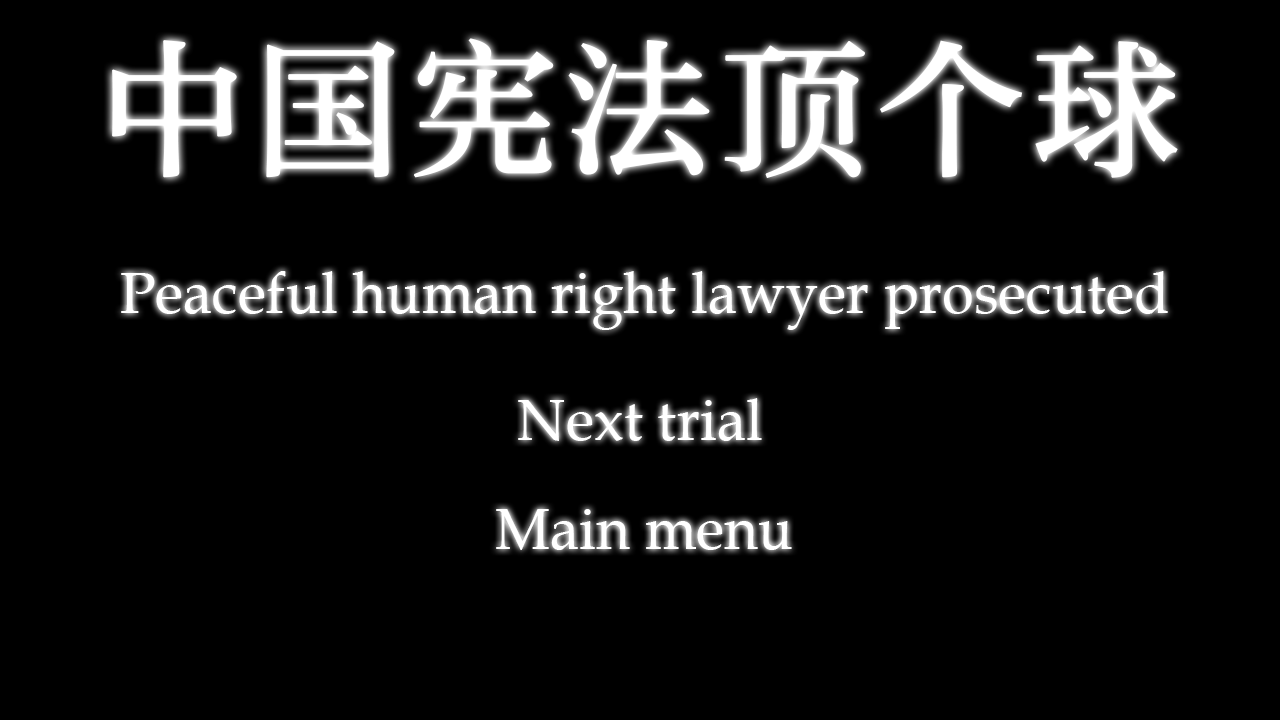
<style>
.page{position:relative;width:1280px;height:720px;background:#000000}
.page>*{position:absolute;margin:0}
.t1{font:58.3px "BookAntiqua";color:#ffffff}
</style>
<div class="page">
<p class="t1" style="left:121px;top:271px;width:1047px;height:59px">Peaceful human right lawyer prosecuted</p>
<p class="t1" style="left:518px;top:398px;width:244px;height:43px">Next trial</p>
<p class="t1" style="left:496px;top:509px;width:296px;height:41px">Main menu</p>
</div>
